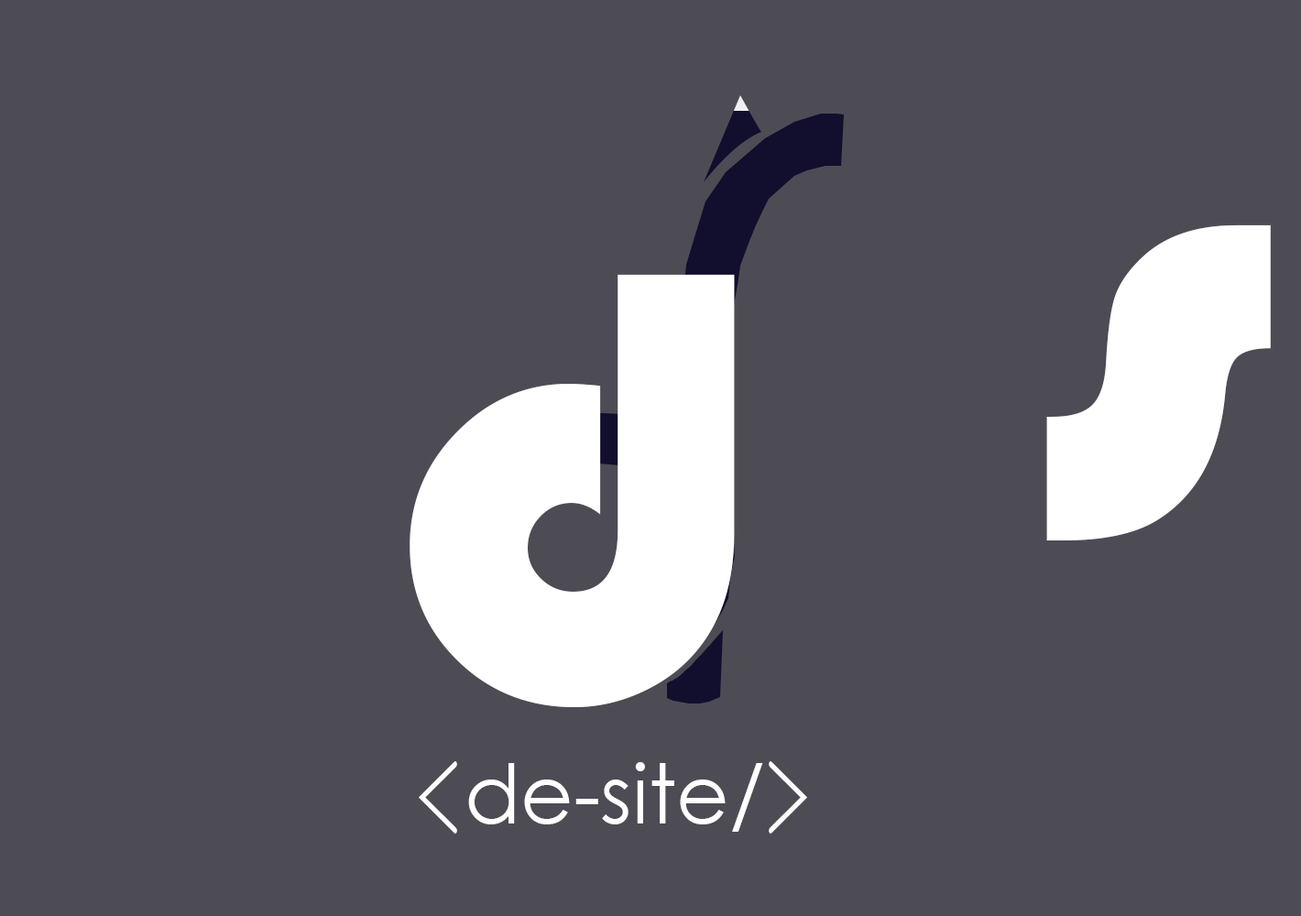
<style>
.page{position:relative;width:1301px;height:916px;background:#4d4c55}
.page>*{position:absolute;margin:0}
.t1{font:638.5px "Bauhaus93";color:#ffffff}
.t2{font:141.3px "CourierNewPSMT";color:#ffffff;scale:0.56 1}
.t3{font:81.6px "CenturyGothic";color:#ffffff}
</style>
<div class="page">
<p class="t1" style="left:1046px;top:225px;width:225px;height:316px">s</p>
<p class="t1" style="left:410px;top:274px;width:325px;height:433px">d</p>
<p class="t2" style="left:419px;top:762px;width:38px;height:72px;rotate:180deg">&gt;</p>
<p class="t2" style="left:769px;top:762px;width:38px;height:72px">&gt;</p>
<p class="t3" style="left:468px;top:762px;width:295px;height:70px">de-site/</p>
</div>
